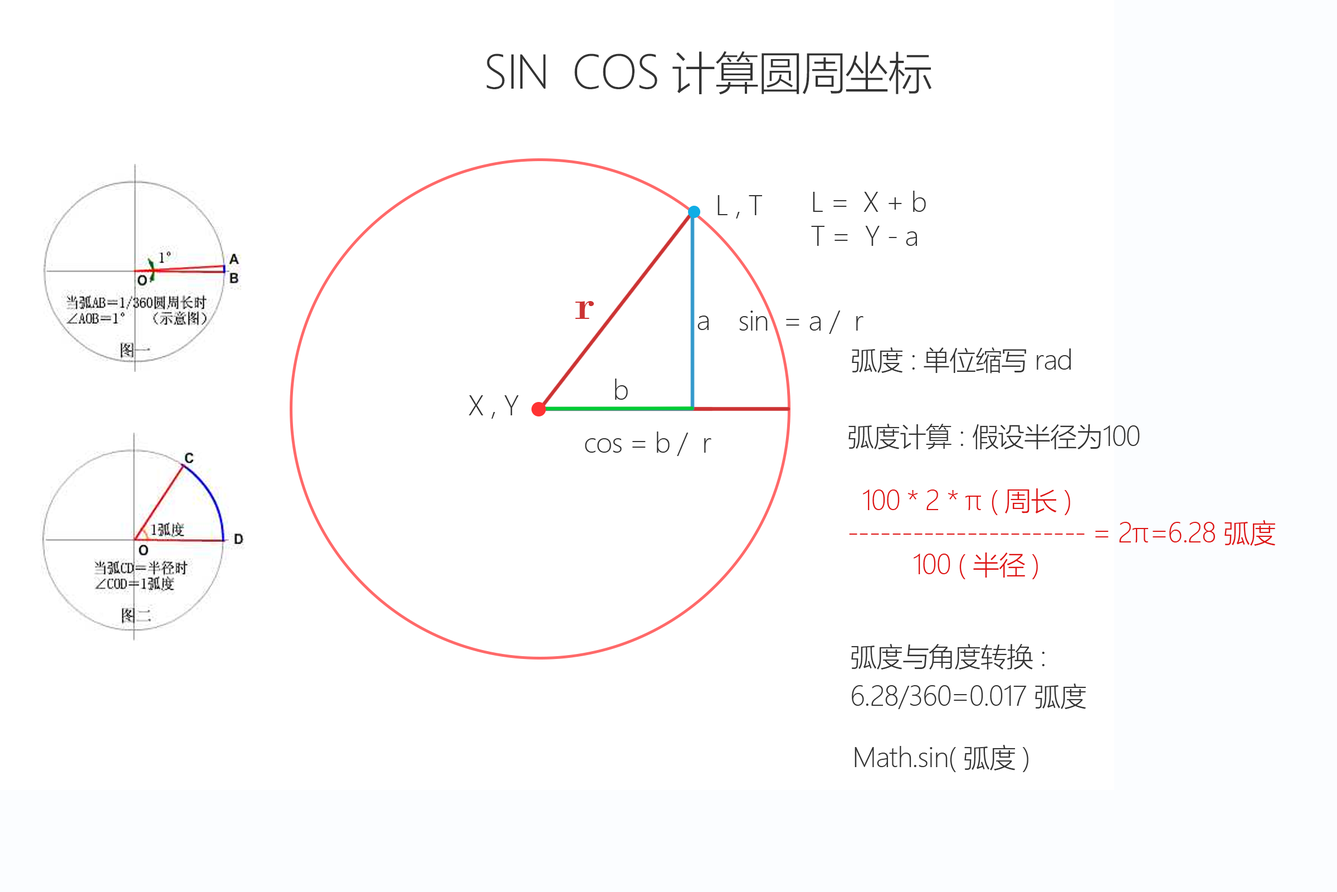
<style>
.page{position:relative;width:1337px;height:892px;background:#ffffff}
.page>*{position:absolute;margin:0}
.t1{font:45.2px "MicrosoftYaHeiLight";letter-spacing:-0.025em;color:#333333}
.t2{font:26.7px "MicrosoftYaHeiLight";letter-spacing:-0.025em;color:#333333}
.t3{font:26.7px/34px "MicrosoftYaHeiLight";letter-spacing:-0.025em;color:#333333}
.t4{font:44.7px "BodoniMT";letter-spacing:-0.025em;color:#cc3333;scale:1.2 1}
.t5{font:26.7px "MicrosoftYaHeiLight";letter-spacing:-0.025em;color:#de1313}
.t6{font:26.7px/39.6px "MicrosoftYaHeiLight";letter-spacing:-0.025em;color:#333333}
</style>
<div class="page">
<p class="t1" style="left:486px;top:51px;width:446px;height:44px">SIN  COS 计算圆周坐标</p>
<p class="t2" style="left:718px;top:195px;width:44px;height:23px">L , T</p>
<p class="t3" style="left:811px;top:191px;width:115px;height:55px">L =  X + b<br>T =  Y - a</p>
<p class="t4" style="left:575px;top:301px;width:19px;height:18px">r</p>
<p class="t2" style="left:698px;top:315px;width:11px;height:15px">a</p>
<p class="t2" style="left:739px;top:310px;width:125px;height:24px">sin  = a /  r</p>
<p class="t2" style="left:852px;top:347px;width:219px;height:26px">弧度 : 单位缩写 rad</p>
<p class="t2" style="left:615px;top:378px;width:13px;height:22px">b</p>
<p class="t2" style="left:469px;top:395px;width:50px;height:23px">X , Y</p>
<p class="t5" style="left:849px;top:424px;width:427px;height:155px"><span class="t2">弧度计算 : 假设半径为100<br><br>  </span>100 * 2 * π ( 周长 )<br>---------------------- = 2π=6.28 弧度<br>         100 ( 半径 )</p>
<p class="t2" style="left:585px;top:431px;width:127px;height:25px">cos = b /  r</p>
<p class="t6" style="left:851px;top:644px;width:235px;height:65px">弧度与角度转换 : <br>6.28/360=0.017 弧度</p>
<p class="t2" style="left:855px;top:744px;width:174px;height:28px">Math.sin( 弧度 )</p>
</div>
